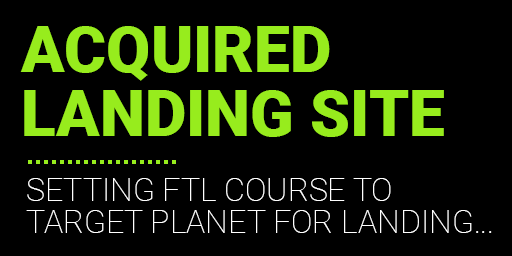
<style>
.page{position:relative;width:512px;height:256px;background:#000000}
.page>*{position:absolute;margin:0}
.t1{font:64px/32px "Roboto-Black";color:#97ec1d;text-transform:uppercase}
.t2{font:32px/32px "Roboto-Thin";color:#ffffff;text-transform:uppercase}
</style>
<div class="page">
<p class="t1" style="left:20px;top:26px;width:424px;height:111px">ACQUIRED<br><br>LANDING SITE</p>
<p class="t2" style="left:26px;top:178px;width:466px;height:55px">SETTING FTL COURSE TO<br>TARGET PLANET FOR LANDING...</p>
</div>
